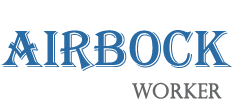
<style>
.page{position:relative;width:233px;height:108px;background:#ffffff}
.page>*{position:absolute;margin:0}
.t1{font:54px "Algerian";color:#296ba4}
.t2{font:20px "PerpetuaTitlingMT-Light";color:#656769;font-weight:bold}
</style>
<div class="page">
<p class="t1" style="left:1px;top:30px;width:231px;height:41px">Airbock</p>
<p class="t2" style="left:132px;top:82px;width:90px;height:17px">Worker</p>
</div>
